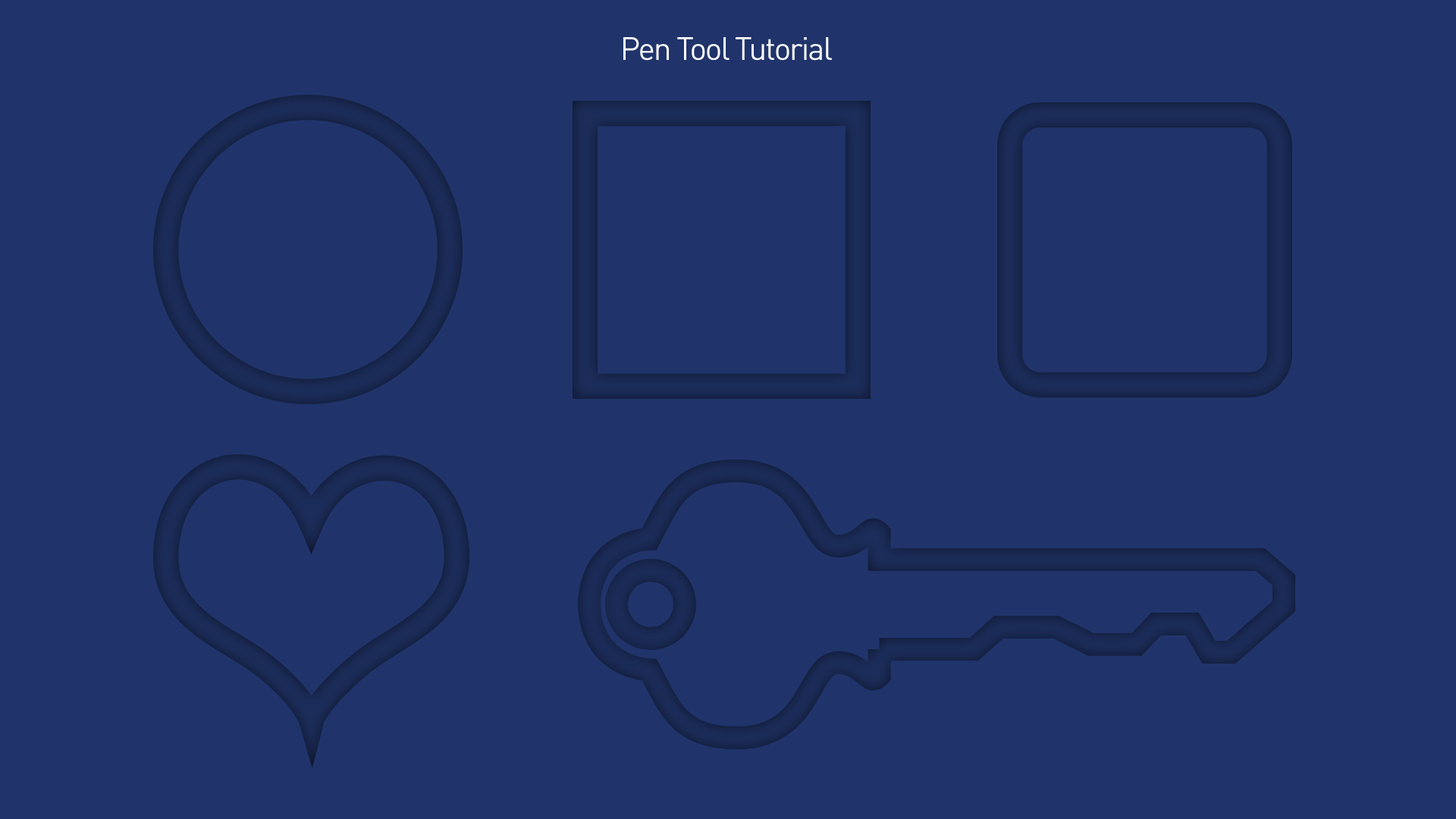
<style>
.page{position:relative;width:1456px;height:819px;background:#20346b}
.page>*{position:absolute;margin:0}
.t1{font:32.1px "DINPro";letter-spacing:-0.05em;color:#ffffff}
</style>
<div class="page">
<p class="t1" style="left:623px;top:37px;width:209px;height:24px">Pen Tool Tutorial</p>
</div>
